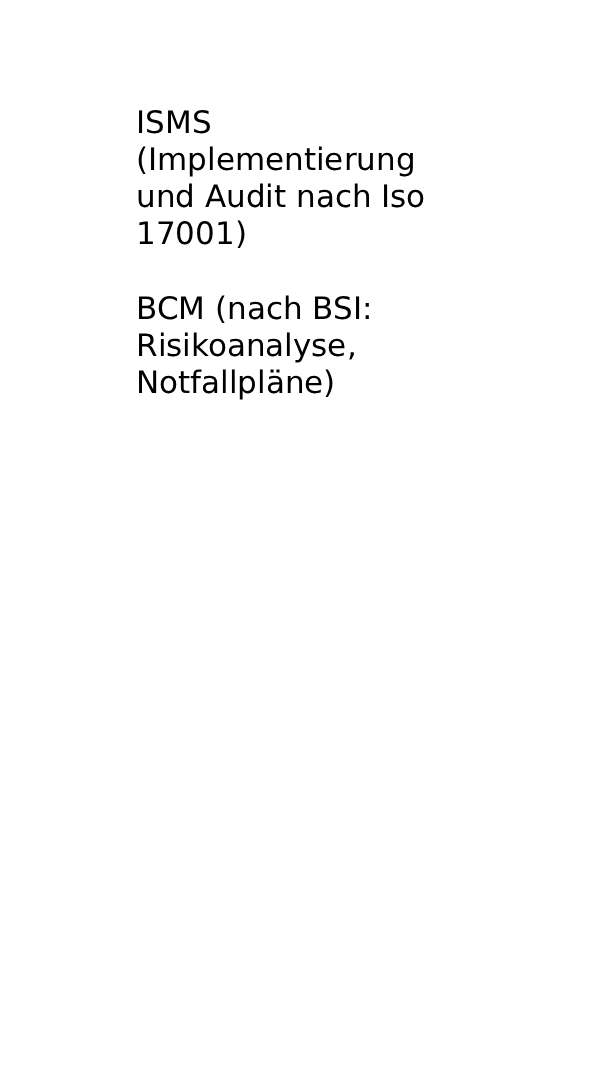
<style>
.page{position:relative;width:613px;height:1088px;background:#ffffff}
.page>*{position:absolute;margin:0}
.t1{font:31px "DejaVuSans";color:#000000}
</style>
<div class="page">
<p class="t1" style="left:138px;top:109px;width:286px;height:291px">ISMS (Implementierung und Audit nach Iso 17001)<br><br>BCM (nach BSI: Risikoanalyse, Notfallpläne)</p>
</div>
